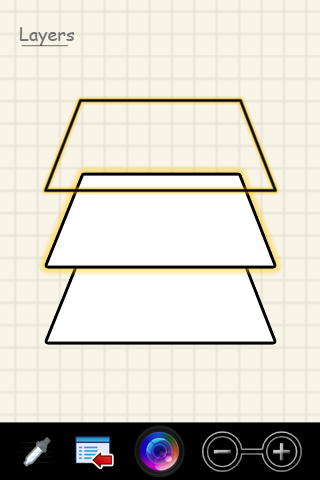
<style>
.page{position:relative;width:320px;height:480px;background:#f8f4e7}
.page>*{position:absolute;margin:0}
.t1{font:18px "ComicSansMS";color:#797775}
</style>
<div class="page">
<p class="t1" style="left:19px;top:27px;width:55px;height:19px">Layers</p>
</div>
